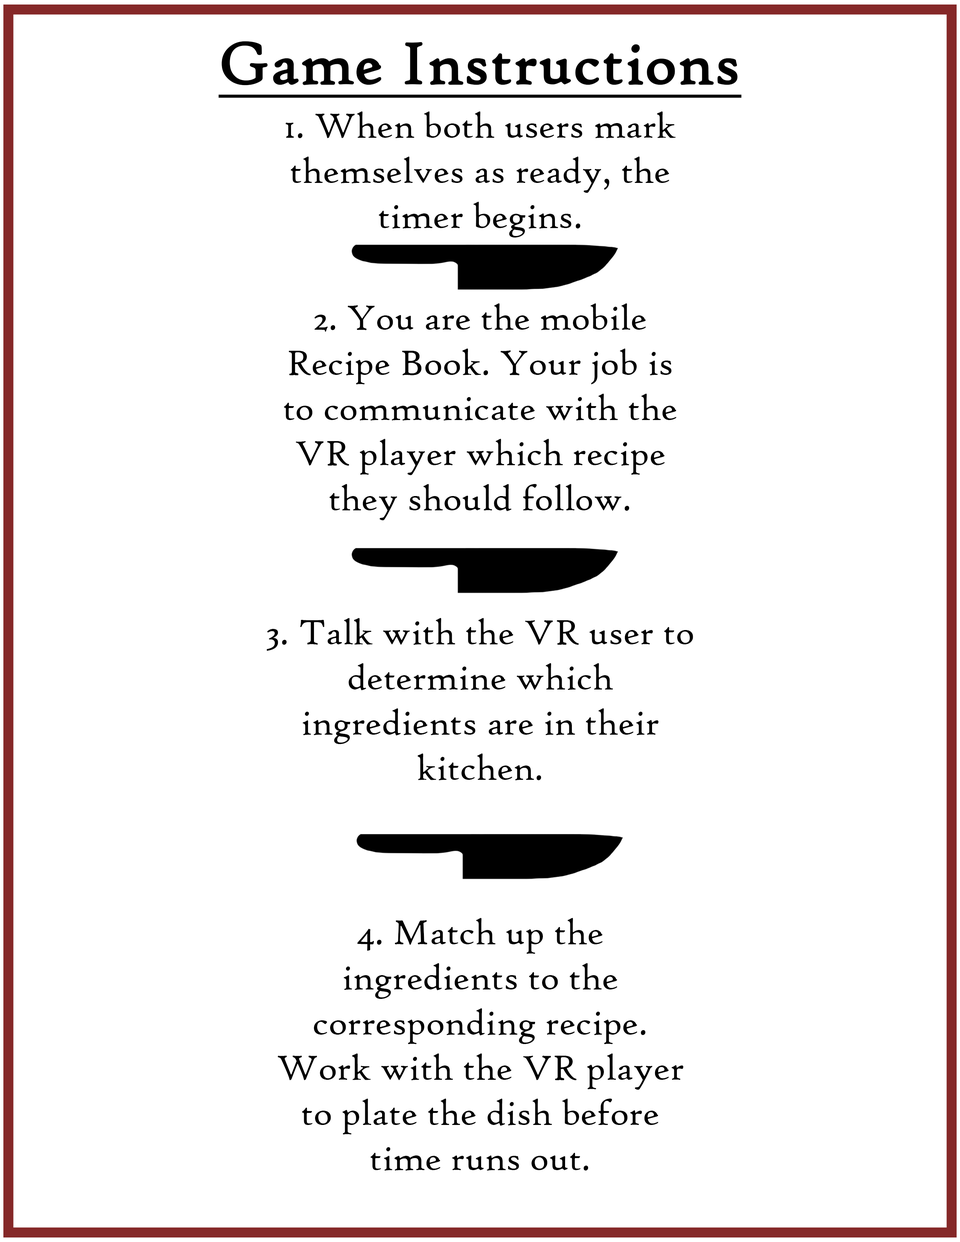
<style>
.page{position:relative;width:960px;height:1242px;background:#ffffff}
.page>*{position:absolute;margin:0}
.t1{font:62.7px "HighTowerText-Reg";color:#000000;font-weight:bold;text-decoration:underline}
.t2{font:37.6px "HighTowerText-Reg";color:#000000}
</style>
<div class="page">
<p class="t1" style="left:218px;top:41px;width:524px;height:57px">Game Instructions</p>
<p class="t2" style="left:285px;top:111px;width:391px;height:127px;text-align:center">1. When both users mark themselves as ready, the timer begins.</p>
<p class="t2" style="left:284px;top:303px;width:392px;height:218px;text-align:center">2. You are the mobile Recipe Book. Your job is to communicate with the VR player which recipe they should follow.</p>
<p class="t2" style="left:267px;top:618px;width:426px;height:162px;text-align:center">3. Talk with the VR user to determine which ingredients are in their kitchen.</p>
<p class="t2" style="left:277px;top:918px;width:406px;height:253px;text-align:center">4. Match up the ingredients to the corresponding recipe. Work with the VR player to plate the dish before time runs out.</p>
</div>
